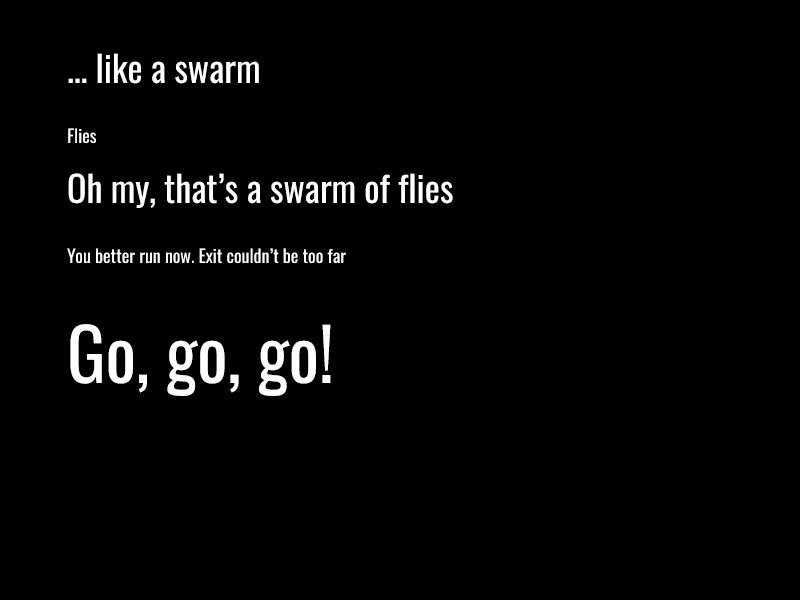
<style>
.page{position:relative;width:800px;height:600px;background:#000000}
.page>*{position:absolute;margin:0}
.t1{font:18px/60px "Oswald-Regular";color:#ffffff}
.t2{font:36px/60px "Oswald-Regular";color:#ffffff}
.t3{font:72px/60px "Oswald-Regular";color:#ffffff}
</style>
<div class="page">
<p class="t1" style="left:67px;top:53px;width:386px;height:343px"><span class="t2">... like a swarm<br></span>Flies<br><span class="t2">Oh my, that’s a swarm of flies<br></span>You better run now. Exit couldn’t be too far<br><br><span class="t3">Go, go, go!</span></p>
</div>
